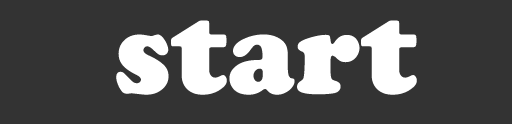
<style>
.page{position:relative;width:512px;height:124px;background:#333333}
.page>*{position:absolute;margin:0}
.t1{font:120px "CooperBlack";color:#ffffff}
</style>
<div class="page">
<p class="t1" style="left:116px;top:20px;width:301px;height:75px">start</p>
</div>
